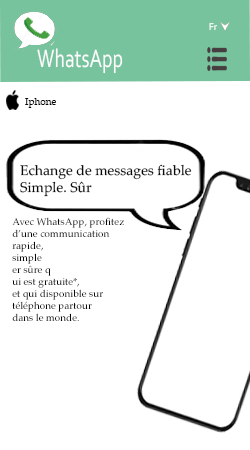
<style>
.page{position:relative;width:250px;height:450px;background:#ffffff}
.page>*{position:absolute;margin:0}
.t1{font:10.3px "Corbel";color:#fdfcfc;scale:0.92 1}
.t2{font:26.3px "Corbel";color:#fdfdfd;scale:0.75 1}
.t3{font:10px "PalatinoLinotype-Roman";color:#090909}
.t4{font:14px "PalatinoLinotype-Roman";color:#090909}
</style>
<div class="page">
<p class="t1" style="left:209px;top:23px;width:8px;height:8px">Fr</p>
<p class="t2" style="left:37px;top:48px;width:86px;height:26px">WhatsApp</p>
<p class="t3" style="left:25px;top:98px;width:31px;height:10px">Iphone</p>
<p class="t4" style="left:20px;top:164px;width:172px;height:33px">Echange de messages fiable<br>Simple. Sûr</p>
<p class="t3" style="left:12px;top:217px;width:112px;height:104px">Avec WhatsApp, profitez <br>d’une communication <br>rapide,<br>simple <br>er sûre q<br>ui est gratuite*, <br>et qui disponible sur<br>téléphone partour <br>dans le monde.</p>
</div>
